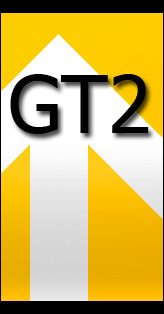
<style>
.page{position:relative;width:164px;height:314px}
.page>*{position:absolute;margin:0}
.t1{font:80px "Tahoma";color:#000000}
</style>
<div class="page">
<p class="t1" style="left:10px;top:74px;width:139px;height:60px">GT2</p>
</div>
